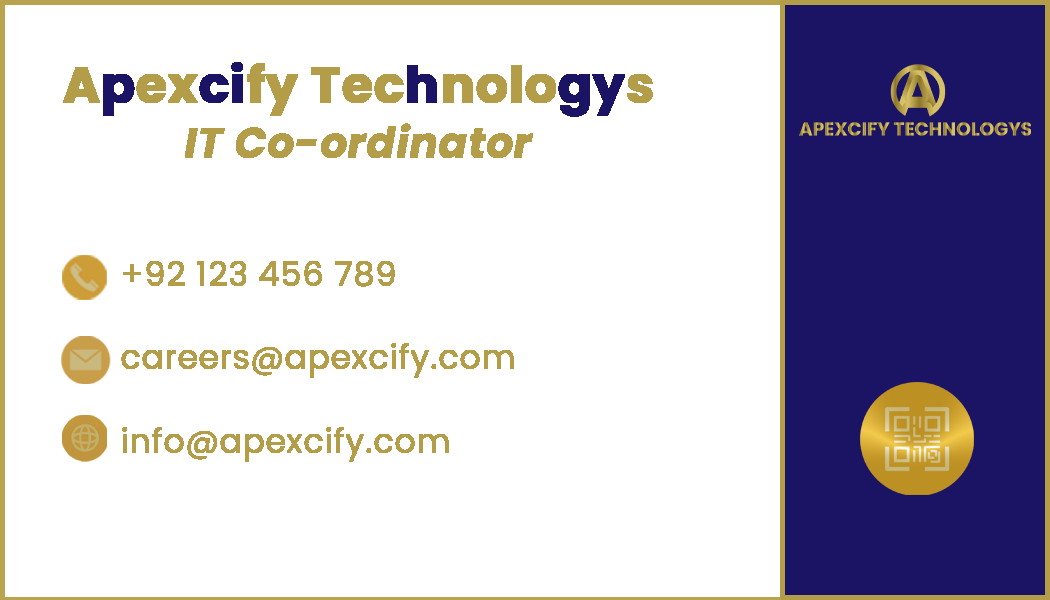
<style>
.page{position:relative;width:1050px;height:600px;background:#ffffff}
.page>*{position:absolute;margin:0}
.t1{font:50px "Poppins-Bold";color:#b39d49;font-weight:bold}
.t2{font:50px "Poppins-Bold";color:#1b1464;font-weight:bold}
.t3{font:41.7px "Poppins-BoldItalic";color:#b39d49;font-weight:bold}
.t4{font:33.3px/83.3px "Poppins-Regular";color:#b39d49;font-weight:bold}
</style>
<div class="page">
<p class="t1" style="left:63px;top:62px;width:590px;height:55px">A<span class="t2">p</span>ex<span class="t2">ci</span>fy Tec<span class="t2">h</span>nolo<span class="t2">gy</span>s</p>
<p class="t3" style="left:185px;top:123px;width:348px;height:35px">IT Co-ordinator</p>
<p class="t4" style="left:121px;top:261px;width:393px;height:201px">+92 123 456 789<br>careers@apexcify.com<br>info@apexcify.com</p>
</div>
